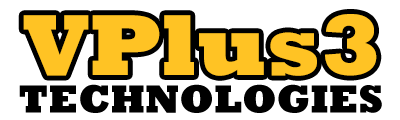
<style>
.page{position:relative;width:400px;height:120px;background:#ffffff}
.page>*{position:absolute;margin:0}
.t1{font:88px "Rockwell-ExtraBold";color:#ffc324}
.t2{font:40px "Rockwell-ExtraBold";color:#000000}
</style>
<div class="page">
<p class="t1" style="left:23px;top:14px;width:354px;height:62px">VPlus3</p>
<p class="t2" style="left:19px;top:84px;width:363px;height:29px">TECHNOLOGIES</p>
</div>
